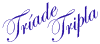
<style>
.page{position:relative;width:100px;height:44px;background:#ffffff}
.page>*{position:absolute;margin:0}
.t1{font:30px "EdwardianScriptITC";color:#2810a2}
</style>
<div class="page">
<p class="t1" style="left:2px;top:2px;width:56px;height:40px;rotate:-30deg">Tríade</p>
<p class="t1" style="left:47px;top:5px;width:51px;height:37px;rotate:-30deg">Tripla</p>
</div>
